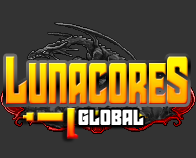
<style>
.page{position:relative;width:196px;height:158px;background:#333333}
.page>*{position:absolute;margin:0}
.t1{font:68px "StarGuard";scale:0.68 1}
.t2{font:21.8px "StarGuard";color:#ffffff}
</style>
<div class="page">
<p class="t1" style="left:6px;top:56px;width:182px;height:48px">LunacoreS</p>
<p class="t2" style="left:78px;top:109px;width:66px;height:16px">GLOBAL</p>
</div>
